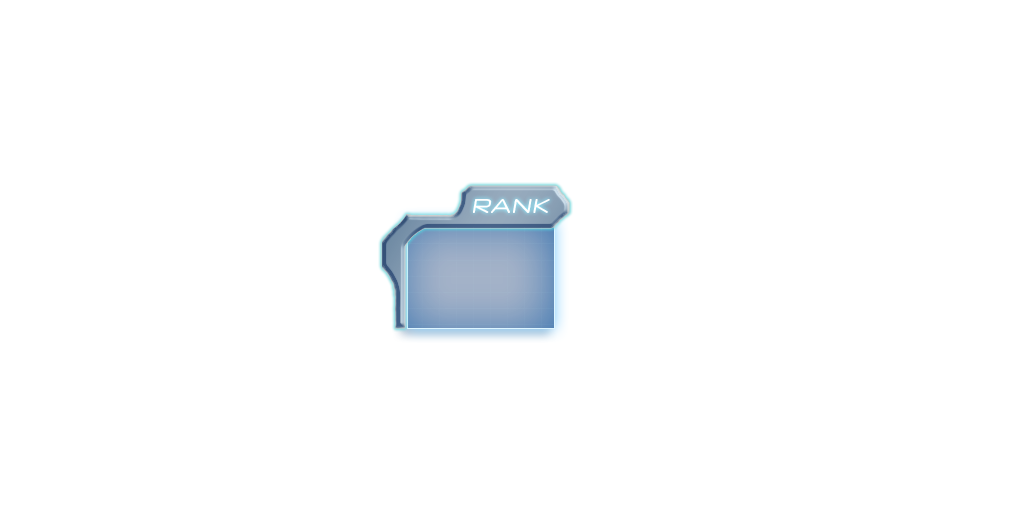
<style>
.page{position:relative;width:1024px;height:512px;background:#ffffff}
.page>*{position:absolute;margin:0}
.t1{font:20px "NeuropolXFree";color:#ffffff;font-style:italic}
</style>
<div class="page">
<p class="t1" style="left:473px;top:199px;width:77px;height:14px">RANK</p>
</div>
